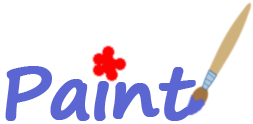
<style>
.page{position:relative;width:253px;height:124px;background:#ffffff}
.page>*{position:absolute;margin:0}
.t1{font:72px "SegoePrint-Bold";letter-spacing:-0.03em;color:#5b66d2;font-weight:bold}
</style>
<div class="page">
<p class="t1" style="left:5px;top:61px;width:191px;height:60px">Paint</p>
</div>
